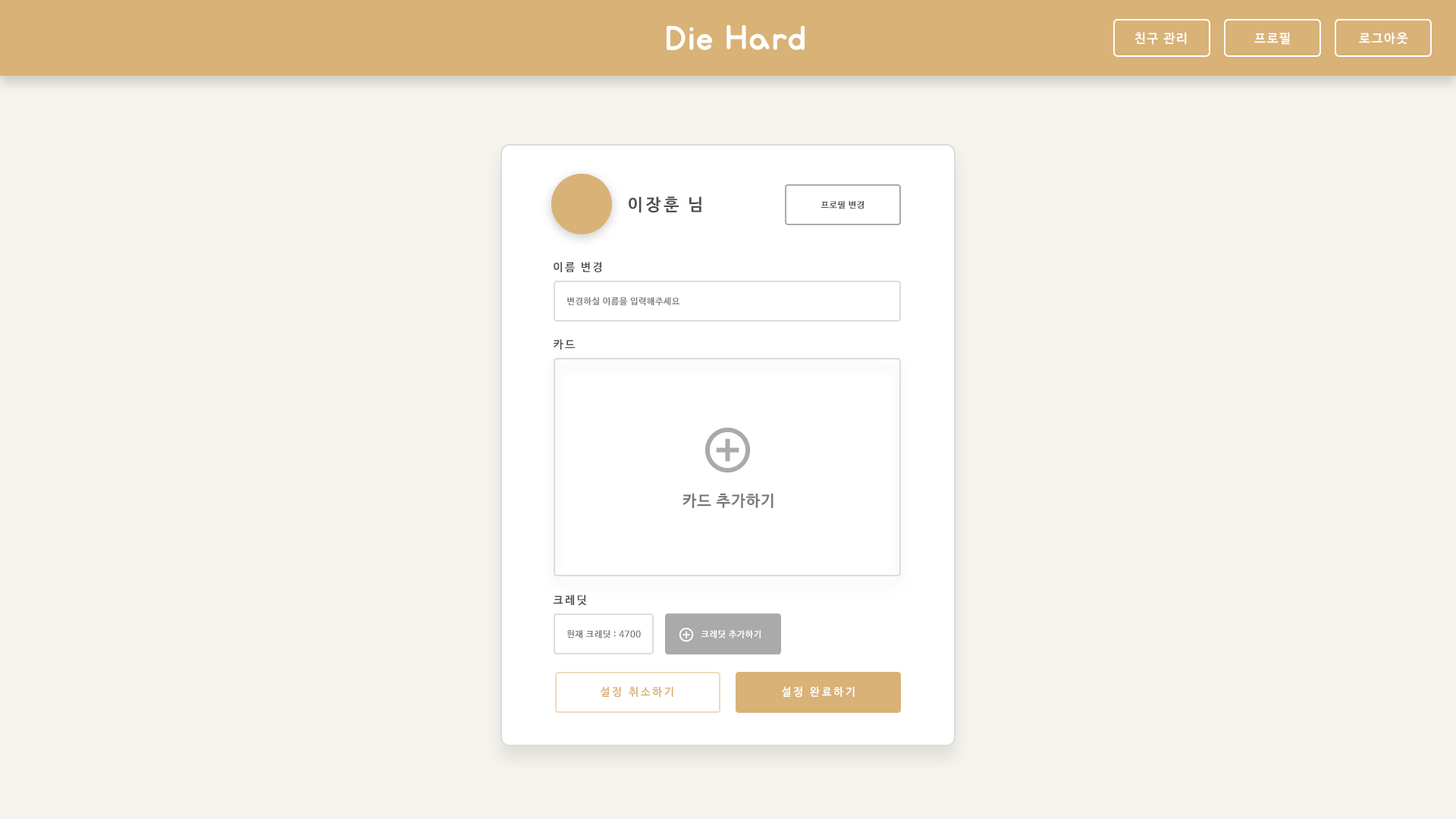
<style>
.page{position:relative;width:1456px;height:819px;background:#f5f3ee}
.page>*{position:absolute;margin:0}
.t1{font:12.6px "NanumBarunGothicBold";letter-spacing:0.1em;color:#fefefe}
.t2{font:12.6px "NanumBarunGothicBold";letter-spacing:0.1em;color:#ffffff}
.t3{font:17px "NanumBarunGothicBold";letter-spacing:0.16em;color:#4d4d4d}
.t4{font:8.8px "NanumBarunGothicBold";letter-spacing:0.05em;color:#4d4d4d}
.t5{font:11.1px "NanumBarunGothicBold";letter-spacing:0.16em;color:#4d4d4d}
.t6{font:8.8px "NanumBarunGothicBold";letter-spacing:0.05em;color:#787878}
.t7{font:15.7px "NanumBarunGothicBold";letter-spacing:0.05em;color:#787878}
.t8{font:8.8px "NanumBarunGothicBold";letter-spacing:0.05em;color:#ffffff}
.t9{font:11px "NanumBarunGothicBold";letter-spacing:0.2em;color:#d8b276}
.t10{font:11px "NanumBarunGothicBold";letter-spacing:0.2em;color:#ffffff}
</style>
<div class="page">
<p class="t1" style="left:1134px;top:32px;width:53px;height:13px">친구 관리</p>
<p class="t2" style="left:1254px;top:32px;width:36px;height:13px">프로필</p>
<p class="t1" style="left:1359px;top:32px;width:49px;height:13px">로그아웃</p>
<p class="t3" style="left:629px;top:196px;width:72px;height:17px">이장훈 님</p>
<p class="t4" style="left:821px;top:201px;width:43px;height:8px">프로필 변경</p>
<p class="t5" style="left:554px;top:262px;width:48px;height:10px">이름 변경</p>
<p class="t6" style="left:567px;top:297px;width:113px;height:9px">변경하실 이름을 입력해주세요</p>
<p class="t5" style="left:553px;top:339px;width:22px;height:11px">카드</p>
<p class="t7" style="left:682px;top:493px;width:91px;height:15px">카드 추가하기</p>
<p class="t5" style="left:553px;top:595px;width:34px;height:11px">크레딧</p>
<p class="t6" style="left:566px;top:630px;width:75px;height:9px">현재 크레딧 : 4700</p>
<p class="t8" style="left:701px;top:630px;width:60px;height:9px">크레딧 추가하기</p>
<p class="t9" style="left:600px;top:686px;width:73px;height:12px">설정 취소하기</p>
<p class="t10" style="left:781px;top:686px;width:74px;height:12px">설정 완료하기</p>
</div>
